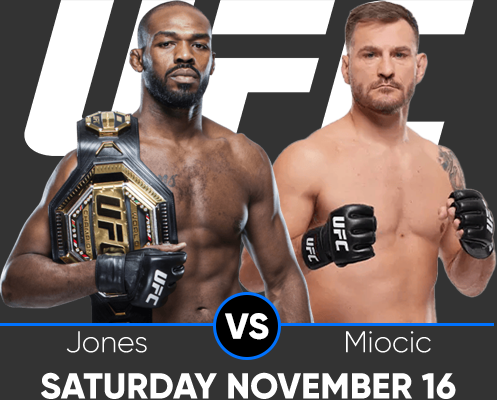
<style>
.page{position:relative;width:497px;height:400px;background:#333333}
.page>*{position:absolute;margin:0}
.t1{font:36px "Gilroy-ExtraBold";color:#ffffff}
.t2{font:30px "Gilroy-Light";color:#ffffff}
.t3{font:36px "Gilroy-ExtraBold";color:#ffffff;text-transform:uppercase}
</style>
<div class="page">
<p class="t1" style="left:225px;top:313px;width:44px;height:27px">VS</p>
<p class="t2" style="left:66px;top:331px;width:81px;height:22px">Jones</p>
<p class="t2" style="left:346px;top:331px;width:85px;height:22px">Miocic</p>
<p class="t3" style="left:41px;top:372px;width:415px;height:27px">Saturday NOVEMBER 16</p>
</div>
